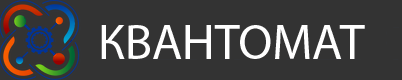
<style>
.page{position:relative;width:402px;height:80px;background:#333333}
.page>*{position:absolute;margin:0}
.t1{font:50px "MyriadPro-Regular";color:#ffffff}
</style>
<div class="page">
<p class="t1" style="left:101px;top:25px;width:264px;height:34px">КВАНТОМАТ</p>
</div>
